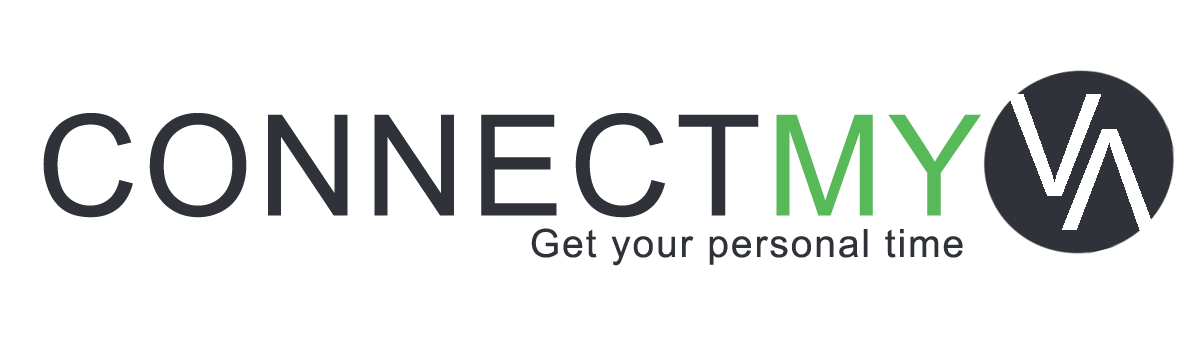
<style>
.page{position:relative;width:1200px;height:362px;background:#ffffff}
.page>*{position:absolute;margin:0}
.t1{font:140.6px "ArialMT";letter-spacing:0.035em;color:#2f3339}
.t2{font:140.6px "ArialMT";letter-spacing:0.035em;color:#57b957}
.t3{font:38.9px "ArialMT";letter-spacing:0.05em;color:#2f3339}
</style>
<div class="page">
<p class="t1" style="left:43px;top:113px;width:938px;height:105px">CONNECT<span class="t2">MY</span></p>
<p class="t3" style="left:531px;top:228px;width:432px;height:38px">Get your personal time</p>
</div>
